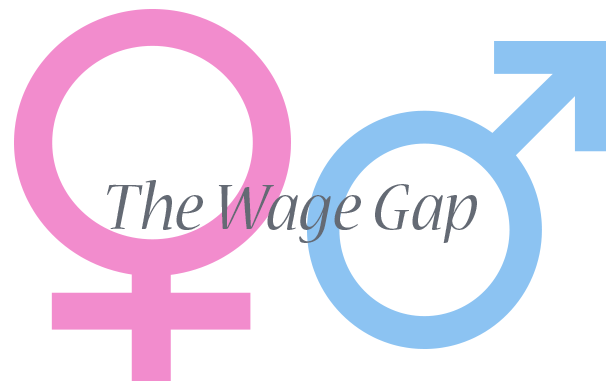
<style>
.page{position:relative;width:614px;height:391px;background:#ffffff}
.page>*{position:absolute;margin:0}
.t1{font:72px "NuevaStd-Italic";color:#646a74}
</style>
<div class="page">
<p class="t1" style="left:107px;top:180px;width:370px;height:63px">The Wage Gap</p>
</div>
